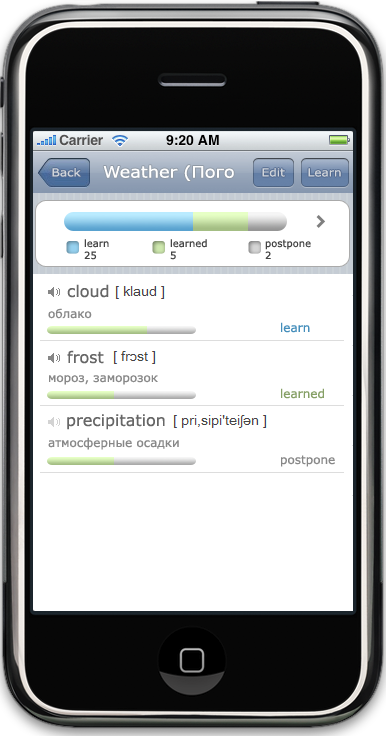
<style>
.page{position:relative;width:386px;height:742px;background:#ffffff}
.page>*{position:absolute;margin:0}
.t1{font:11px "Verdana";color:#d1d5db;scale:1.1 1}
.t2{font:16px "Verdana";color:#ffffff;scale:1.11 1}
.t3{font:10px "Verdana";color:#444444}
.t4{font:16px "Verdana";color:#666666}
.t5{font:12px "Verdana";color:#888888}
.t6{font:12px "Verdana";color:#458ebb}
.t7{font:12px "Verdana";color:#86a066}
</style>
<div class="page">
<p class="t1" style="left:52px;top:168px;width:29px;height:9px">Back</p>
<p class="t2" style="left:103px;top:165px;width:131px;height:16px">Weather (Пого</p>
<p class="t1" style="left:262px;top:168px;width:23px;height:9px">Edit</p>
<p class="t1" style="left:308px;top:168px;width:33px;height:9px">Learn</p>
<p class="t3" style="left:84px;top:239px;width:25px;height:21px">learn<br>25</p>
<p class="t3" style="left:170px;top:239px;width:37px;height:21px">learned<br>5</p>
<p class="t3" style="left:265px;top:239px;width:46px;height:20px">postpone<br>2</p>
<p class="t4" style="left:67px;top:284px;width:42px;height:14px">cloud</p>
<p class="t5" style="left:48px;top:308px;width:44px;height:11px">облако</p>
<p class="t6" style="left:281px;top:322px;width:29px;height:11px">learn</p>
<p class="t4" style="left:67px;top:350px;width:37px;height:14px">frost</p>
<p class="t5" style="left:49px;top:375px;width:109px;height:10px">мороз, заморозок</p>
<p class="t7" style="left:281px;top:388px;width:43px;height:11px">learned</p>
<p class="t4" style="left:67px;top:414px;width:98px;height:16px">precipitation</p>
<p class="t5" style="left:48px;top:437px;width:131px;height:13px">атмосферные осадки</p>
<p class="t5" style="left:281px;top:455px;width:54px;height:12px">postpone</p>
</div>
